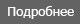
<style>
.page{position:relative;width:80px;height:24px;background:#636363}
.page>*{position:absolute;margin:0}
.t1{font:13.3px "Tahoma";color:#ffffff}
</style>
<div class="page">
<p class="t1" style="left:8px;top:6px;width:66px;height:13px">Подробнее</p>
</div>
